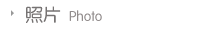
<style>
.page{position:relative;width:198px;height:29px;background:#ffffff}
.page>*{position:absolute;margin:0}
.t1{font:18px "FZY3JW--GB1-0";color:#777373}
.t2{font:14px "FZY3JW--GB1-0";color:#928d8d}
</style>
<div class="page">
<p class="t1" style="left:26px;top:6px;width:35px;height:17px">照片</p>
<p class="t2" style="left:69px;top:10px;width:33px;height:11px">Photo</p>
</div>
